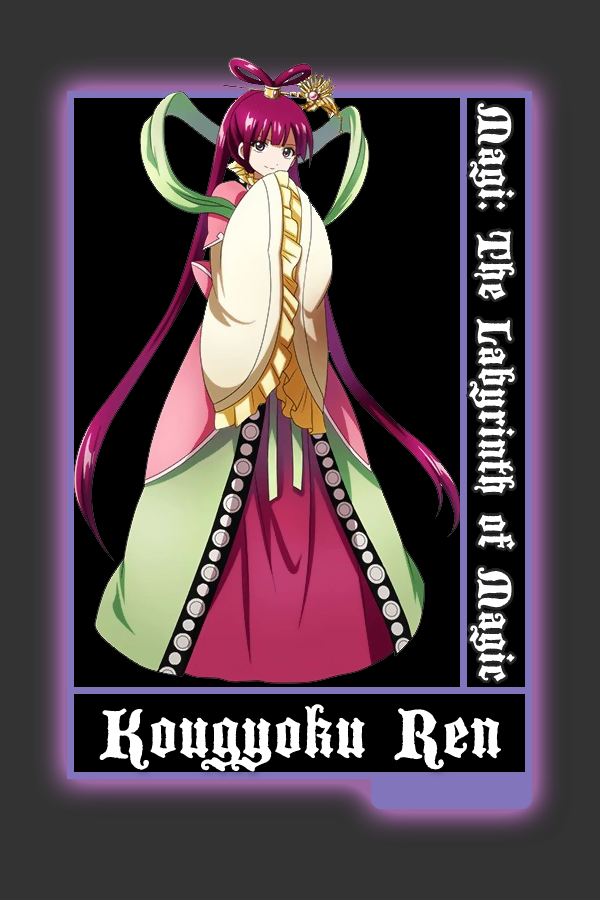
<style>
.page{position:relative;width:600px;height:900px;background:#000000}
.page>*{position:absolute;margin:0}
.t1{font:50px "BlackwoodCastle";color:#ffffff}
.t2{font:75px "BlackwoodCastle";color:#ffffff}
</style>
<div class="page">
<p class="t1" style="left:469px;top:103px;width:46px;height:579px;rotate:90deg">Magi: The Labyrinth of Magic</p>
<p class="t2" style="left:99px;top:704px;width:403px;height:68px">Kougyoku Ren</p>
</div>
